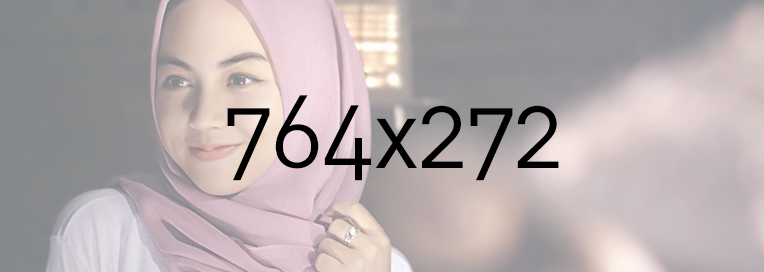
<style>
.page{position:relative;width:764px;height:272px}
.page>*{position:absolute;margin:0}
.t1{font:100px "DIN-RegularAlternate";letter-spacing:-0.025em;color:#000000}
</style>
<div class="page">
<p class="t1" style="left:227px;top:95px;width:332px;height:86px">764x272</p>
</div>
